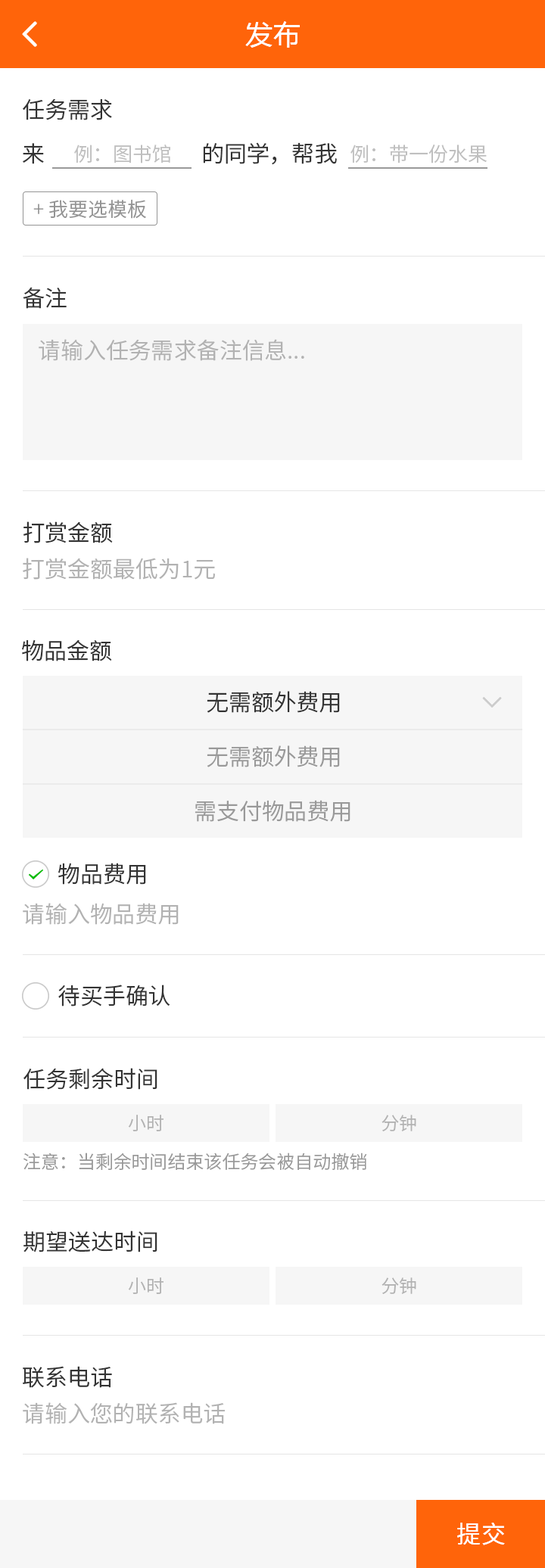
<style>
.page{position:relative;width:545px;height:1568px;background:#ffffff}
.page>*{position:absolute;margin:0}
.t1{font:27.2px "MicrosoftYaHei";letter-spacing:0.03em;color:#ffffff}
.t2{font:22.7px "NotoSansCJKsc-DemiLight";color:#333333}
.t3{font:19.7px "NotoSansCJKsc-DemiLight";color:#bfbfbf}
.t4{font:19.7px "NotoSansCJKsc-DemiLight";color:#949494}
.t5{font:22.7px "NotoSansCJKsc-DemiLight";color:#b2b2b2}
.t6{font:22.7px "NotoSansCJKsc-DemiLight";color:#999999}
.t7{font:18.2px "NotoSansCJKsc-DemiLight";color:#b2b2b2}
.t8{font:18.2px "NotoSansCJKsc-DemiLight";color:#999999}
.t9{font:24.2px "NotoSansCJKsc-Regular";letter-spacing:0.03em;color:#ffffff;font-variant:small-caps}
</style>
<div class="page">
<p class="t1" style="left:245px;top:21px;width:55px;height:27px">发布</p>
<p class="t2" style="left:23px;top:99px;width:89px;height:21px">任务需求</p>
<p class="t2" style="left:23px;top:142px;width:314px;height:23px">来                               的同学，帮我</p>
<p class="t3" style="left:74px;top:145px;width:96px;height:18px">例：图书馆</p>
<p class="t3" style="left:350px;top:145px;width:137px;height:18px">例：带一份水果</p>
<p class="t4" style="left:33px;top:199px;width:113px;height:20px">+ 我要选模板</p>
<p class="t2" style="left:23px;top:287px;width:44px;height:22px">备注</p>
<p class="t5" style="left:39px;top:339px;width:265px;height:22px">请输入任务需求备注信息...</p>
<p class="t2" style="left:23px;top:521px;width:90px;height:22px">打赏金额</p>
<p class="t5" style="left:23px;top:558px;width:192px;height:22px">打赏金额最低为1元</p>
<p class="t2" style="left:22px;top:639px;width:90px;height:22px">物品金额</p>
<p class="t2" style="left:207px;top:691px;width:133px;height:22px">无需额外费用</p>
<p class="t6" style="left:207px;top:745px;width:133px;height:22px">无需额外费用</p>
<p class="t6" style="left:194px;top:800px;width:156px;height:22px">需支付物品费用</p>
<p class="t2" style="left:58px;top:863px;width:88px;height:22px">物品费用</p>
<p class="t5" style="left:23px;top:903px;width:156px;height:22px">请输入物品费用</p>
<p class="t2" style="left:58px;top:985px;width:112px;height:21px">待买手确认</p>
<p class="t2" style="left:23px;top:1068px;width:134px;height:22px">任务剩余时间</p>
<p class="t7" style="left:128px;top:1115px;width:35px;height:16px">小时</p>
<p class="t7" style="left:381px;top:1115px;width:35px;height:16px">分钟</p>
<p class="t8" style="left:23px;top:1153px;width:344px;height:17px">注意：当剩余时间结束该任务会被自动撤销</p>
<p class="t2" style="left:23px;top:1230px;width:134px;height:22px">期望送达时间</p>
<p class="t7" style="left:128px;top:1277px;width:35px;height:17px">小时</p>
<p class="t7" style="left:381px;top:1277px;width:35px;height:17px">分钟</p>
<p class="t2" style="left:23px;top:1366px;width:89px;height:22px">联系电话</p>
<p class="t5" style="left:23px;top:1402px;width:202px;height:22px">请输入您的联系电话</p>
<p class="t9" style="left:457px;top:1523px;width:48px;height:22px">提交</p>
</div>
